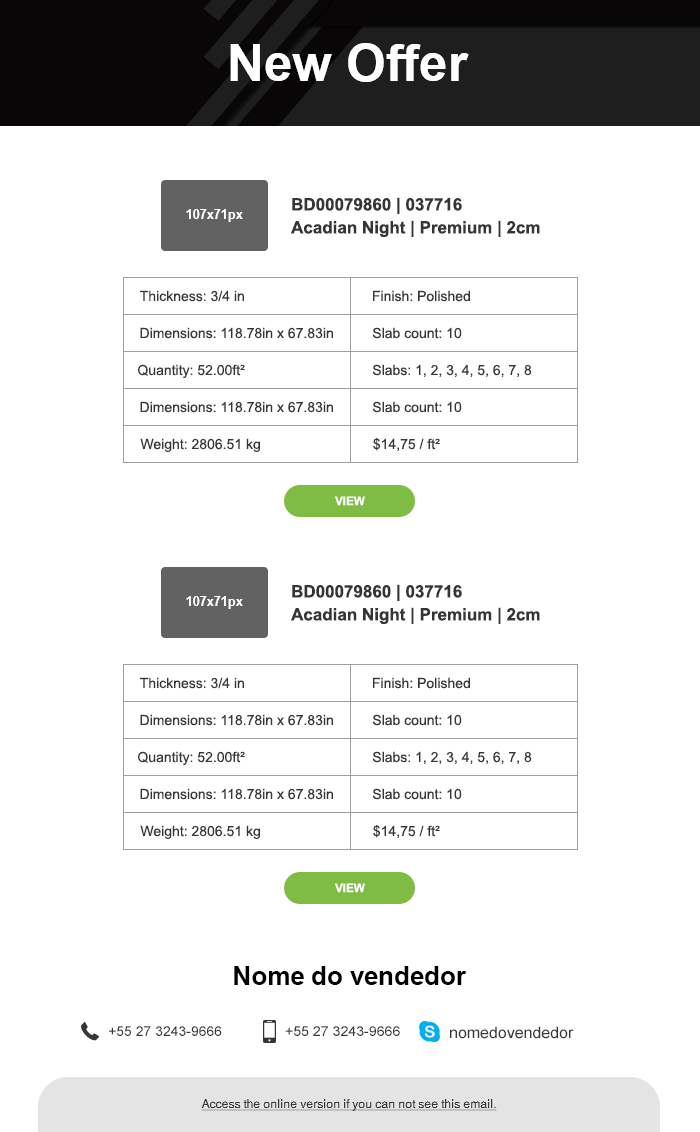
<style>
.page{position:relative;width:700px;height:1132px;background:#ffffff}
.page>*{position:absolute;margin:0}
.t1{font:50.8px "Arial-BoldMT";color:#ffffff}
.t2{font:17px/23px "Arial-BoldMT";color:#373435}
.t3{font:13px "Arial-BoldMT";color:#ffffff}
.t4{font:14px "ArialMT";color:#363636}
.t5{font:11.8px "Arial-BoldMT";color:#ffffff;text-transform:uppercase}
.t6{font:26px "Arial-BoldMT";color:#000000}
.t7{font:15.8px "ArialMT";color:#363636}
.t8{font:12px "Helvetica-Normal";color:#363636;text-decoration:underline}
</style>
<div class="page">
<p class="t1" style="left:230px;top:43px;width:239px;height:39px">New Offer</p>
<p class="t2" style="left:291px;top:197px;width:249px;height:40px">BD00079860 | 037716<br>Acadian Night | Premium | 2cm</p>
<p class="t3" style="left:186px;top:209px;width:57px;height:13px">107x71px</p>
<p class="t4" style="left:140px;top:290px;width:104px;height:12px">Thickness: 3/4 in</p>
<p class="t4" style="left:373px;top:290px;width:97px;height:12px">Finish: Polished</p>
<p class="t4" style="left:140px;top:327px;width:193px;height:12px">Dimensions: 118.78in x 67.83in</p>
<p class="t4" style="left:372px;top:327px;width:90px;height:12px">Slab count: 10</p>
<p class="t4" style="left:138px;top:364px;width:107px;height:14px">Quantity: 52.00ft²</p>
<p class="t4" style="left:372px;top:364px;width:160px;height:13px">Slabs: 1, 2, 3, 4, 5, 6, 7, 8</p>
<p class="t4" style="left:140px;top:401px;width:193px;height:12px">Dimensions: 118.78in x 67.83in</p>
<p class="t4" style="left:372px;top:401px;width:90px;height:12px">Slab count: 10</p>
<p class="t4" style="left:140px;top:438px;width:120px;height:14px">Weight: 2806.51 kg</p>
<p class="t4" style="left:373px;top:438px;width:67px;height:13px">$14,75 / ft²</p>
<p class="t5" style="left:335px;top:496px;width:30px;height:10px">VIEW</p>
<p class="t2" style="left:291px;top:584px;width:249px;height:40px">BD00079860 | 037716<br>Acadian Night | Premium | 2cm</p>
<p class="t3" style="left:186px;top:596px;width:57px;height:13px">107x71px</p>
<p class="t4" style="left:140px;top:677px;width:104px;height:12px">Thickness: 3/4 in</p>
<p class="t4" style="left:373px;top:677px;width:97px;height:12px">Finish: Polished</p>
<p class="t4" style="left:140px;top:714px;width:193px;height:12px">Dimensions: 118.78in x 67.83in</p>
<p class="t4" style="left:372px;top:714px;width:90px;height:12px">Slab count: 10</p>
<p class="t4" style="left:138px;top:751px;width:107px;height:14px">Quantity: 52.00ft²</p>
<p class="t4" style="left:372px;top:751px;width:160px;height:13px">Slabs: 1, 2, 3, 4, 5, 6, 7, 8</p>
<p class="t4" style="left:140px;top:788px;width:193px;height:12px">Dimensions: 118.78in x 67.83in</p>
<p class="t4" style="left:372px;top:788px;width:90px;height:12px">Slab count: 10</p>
<p class="t4" style="left:140px;top:825px;width:120px;height:14px">Weight: 2806.51 kg</p>
<p class="t4" style="left:373px;top:825px;width:67px;height:13px">$14,75 / ft²</p>
<p class="t5" style="left:335px;top:883px;width:30px;height:10px">VIEW</p>
<p class="t6" style="left:234px;top:966px;width:233px;height:19px">Nome do vendedor</p>
<p class="t4" style="left:109px;top:1026px;width:113px;height:10px">+55 27 3243-9666</p>
<p class="t4" style="left:285px;top:1026px;width:115px;height:10px">+55 27 3243-9666</p>
<p class="t7" style="left:450px;top:1026px;width:124px;height:13px">nomedovendedor</p>
<p class="t8" style="left:201px;top:1099px;width:296px;height:12px">Access the online version if you can not see this email.</p>
</div>
